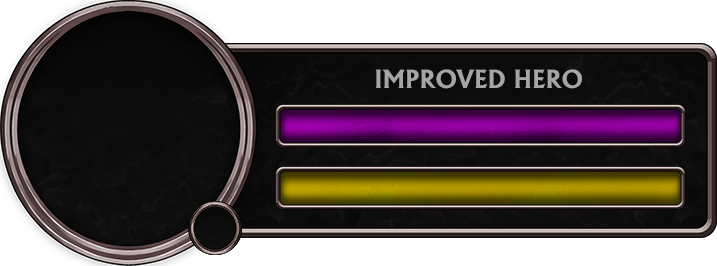
<style>
.page{position:relative;width:717px;height:266px;background:#ffffff}
.page>*{position:absolute;margin:0}
.t1{font:24px "AlbertusBold-Regular";color:#a5a5a5}
</style>
<div class="page">
<p class="t1" style="left:375px;top:69px;width:207px;height:20px">IMPROVED HERO</p>
</div>
